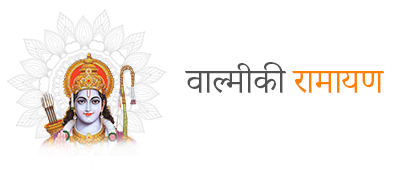
<style>
.page{position:relative;width:394px;height:170px;background:#ffffff}
.page>*{position:absolute;margin:0}
.t1{font:41.5px "AdobeDevanagari-Regular";letter-spacing:-0.005em;color:#525252}
.t2{font:41.5px "AdobeDevanagari-Regular";letter-spacing:-0.005em;color:#ff8002}
</style>
<div class="page">
<p class="t1" style="left:185px;top:62px;width:200px;height:31px">वाल्मीकी <span class="t2">रामायण</span></p>
</div>
